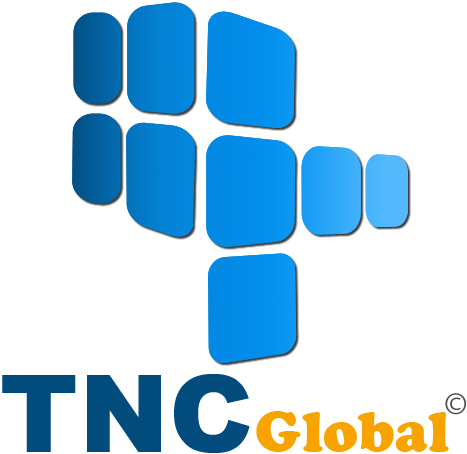
<style>
.page{position:relative;width:467px;height:454px;background:#ffffff}
.page>*{position:absolute;margin:0}
.t1{font:108.3px "Arial-Black";color:#024c7d}
.t2{font:58.3px "CooperBlack";color:#f7a300}
</style>
<div class="page">
<p class="t1" style="left:2px;top:374px;width:248px;height:79px">TNC</p>
<p class="t2" style="left:256px;top:411px;width:193px;height:41px">Global</p>
</div>
